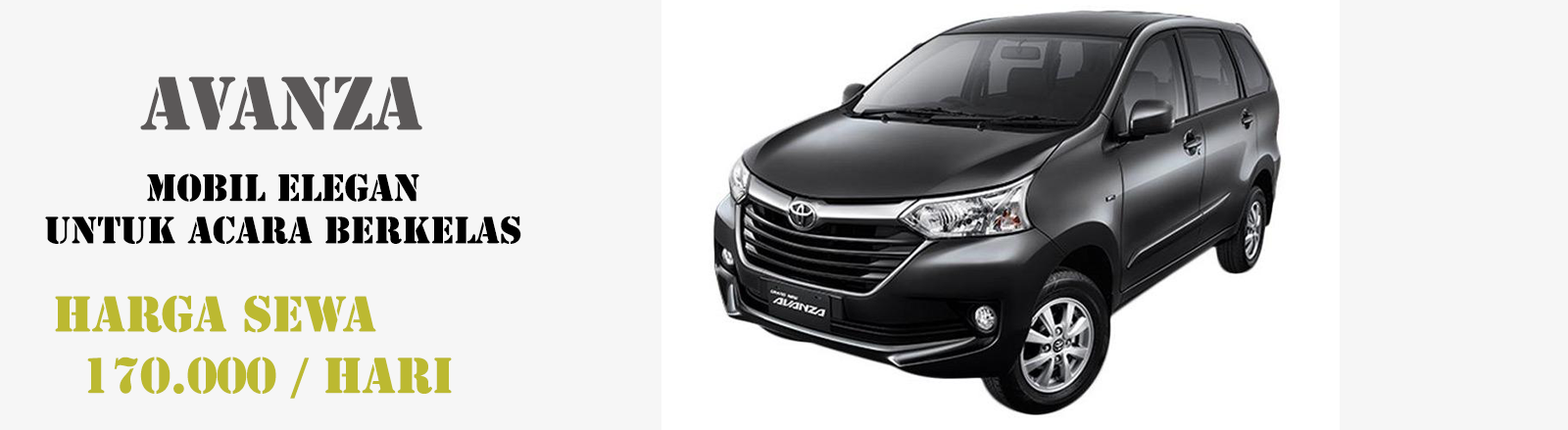
<style>
.page{position:relative;width:1568px;height:430px;background:#f6f6f6}
.page>*{position:absolute;margin:0}
.t1{font:70.6px "StencilStd";color:#5b5858}
.t2{font:35.3px "StencilStd";color:#000000}
.t3{font:47px "StencilStd";color:#bcb931}
</style>
<div class="page">
<p class="t1" style="left:140px;top:76px;width:282px;height:54px">AVANZA</p>
<p class="t2" style="left:45px;top:173px;width:476px;height:71px;text-align:center">MOBIL elegan<br>untuk acara berkelas</p>
<p class="t3" style="left:55px;top:295px;width:321px;height:38px">HARGA SEWA</p>
<p class="t3" style="left:87px;top:357px;width:365px;height:42px">170.000 / hari</p>
</div>
